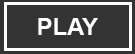
<style>
.page{position:relative;width:135px;height:54px;background:#333333}
.page>*{position:absolute;margin:0}
.t1{font:24px "Arial-BoldMT";color:#ffffff}
</style>
<div class="page">
<p class="t1" style="left:38px;top:18px;width:60px;height:17px">PLAY</p>
</div>
